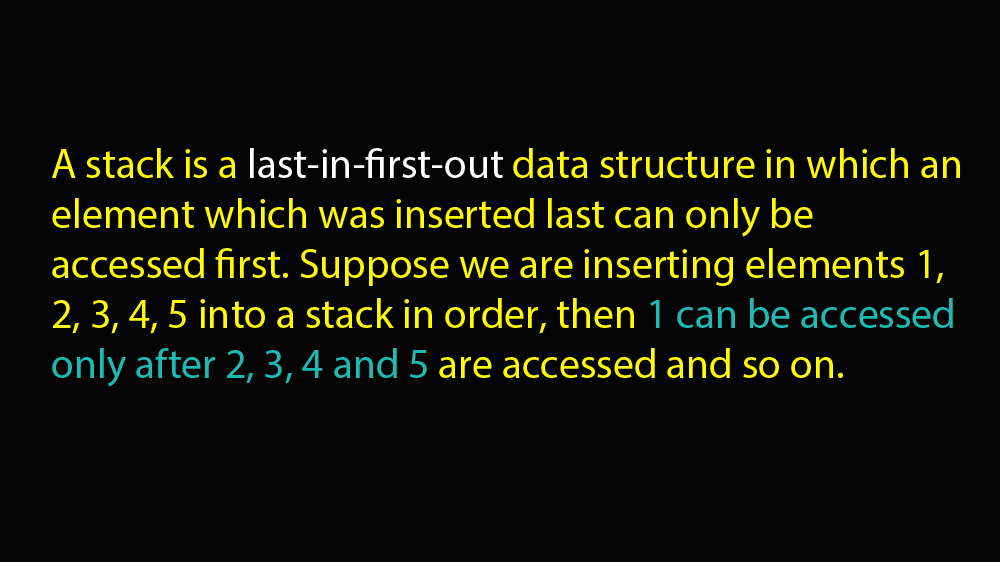
<style>
.page{position:relative;width:1000px;height:562px;background:#050404}
.page>*{position:absolute;margin:0}
.t1{font:41.7px "MyriadPro-Regular";color:#fefb04}
.t2{font:41.7px "MyriadPro-Regular";color:#ffffff}
.t3{font:41.7px "MyriadPro-Regular";color:#1cbbb4}
</style>
<div class="page">
<p class="t1" style="left:52px;top:148px;width:908px;height:239px">A stack is a <span class="t2">last-in-first-out</span> data structure in which an element which was inserted last can only be accessed first. Suppose we are inserting elements 1, 2, 3, 4, 5 into a stack in order, then <span class="t3">1 can be accessed only after 2, 3, 4 and 5</span> are accessed and so on.</p>
</div>
